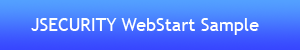
<style>
.page{position:relative;width:300px;height:50px}
.page>*{position:absolute;margin:0}
.t1{font:18px "TrebuchetMS";color:#ffffff}
</style>
<div class="page">
<p class="t1" style="left:31px;top:18px;width:228px;height:17px">JSECURITY WebStart Sample</p>
</div>
